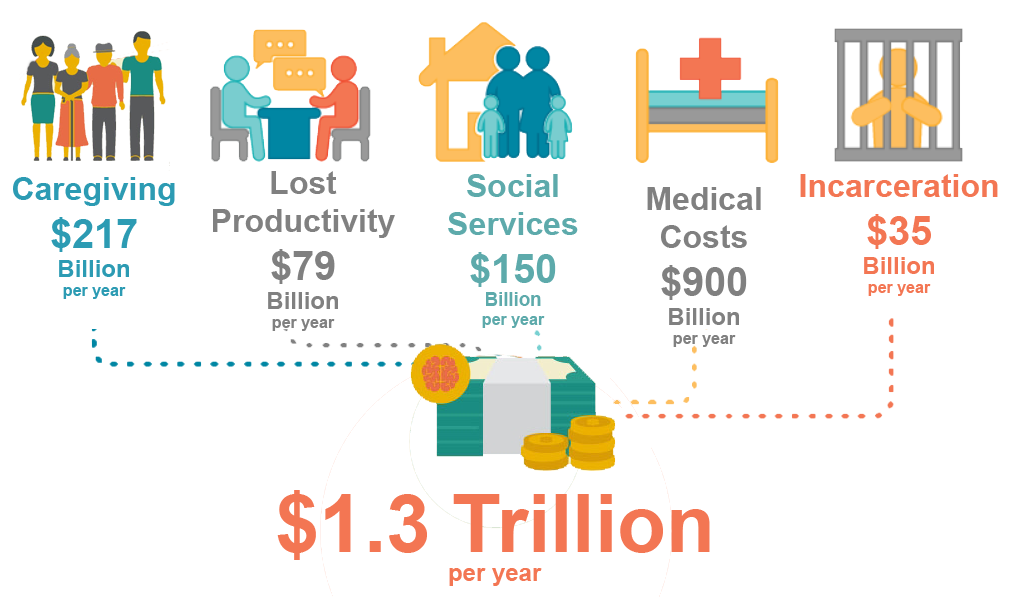
<style>
.page{position:relative;width:1012px;height:597px;background:#ffffff}
.page>*{position:absolute;margin:0}
.t1{font:32px "Arial-BoldMT";color:#808080}
.t2{font:40px "Arial-BoldMT";color:#808080}
.t3{font:24px "Arial-BoldMT";color:#808080}
.t4{font:16px "Arial-BoldMT";color:#808080}
.t5{font:32px "Arial-BoldMT";color:#5daaab}
.t6{font:40px "Arial-BoldMT";color:#5daaab}
.t7{font:18.7px "Arial-BoldMT";color:#5daaab}
.t8{font:16px "Arial-BoldMT";color:#5daaab}
.t9{font:32px "Arial-BoldMT";color:#f37653}
.t10{font:40px "Arial-BoldMT";color:#f37653}
.t11{font:24px "Arial-BoldMT";color:#f37653}
.t12{font:16px "Arial-BoldMT";color:#f37653}
.t13{font:32px "Arial-BoldMT";color:#2c9bb3}
.t14{font:40px "Arial-BoldMT";color:#2c9bb3}
.t15{font:24px "Arial-BoldMT";color:#2c9bb3}
.t16{font:16px "Arial-BoldMT";color:#2c9bb3}
.t17{font:80px "Arial-BoldMT";color:#f37653}
</style>
<div class="page">
<p class="t1" style="left:213px;top:171px;width:182px;height:160px;text-align:center">Lost<br>Productivity<br><span class="t2">$79<br></span><span class="t3">Billion<br></span><span class="t4">per year</span></p>
<p class="t5" style="left:448px;top:174px;width:130px;height:154px;text-align:center">Social<br>Services<br><span class="t6">$150<br></span><span class="t7">Billion<br></span><span class="t8">per year</span></p>
<p class="t9" style="left:800px;top:174px;width:198px;height:122px;text-align:center">Incarceration<br><span class="t10">$35<br></span><span class="t11">Billion<br></span><span class="t12">per year</span></p>
<p class="t13" style="left:13px;top:177px;width:162px;height:122px;text-align:center">Caregiving<br><span class="t14">$217<br></span><span class="t15">Billion<br></span><span class="t16">per year</span></p>
<p class="t1" style="left:647px;top:187px;width:114px;height:160px;text-align:center">Medical<br>Costs<br><span class="t2">$900<br></span><span class="t3">Billion<br></span><span class="t4">per year</span></p>
<p class="t17" style="left:277px;top:490px;width:433px;height:96px;text-align:center">$1.3 Trillion<br><span class="t11">per year</span></p>
</div>
